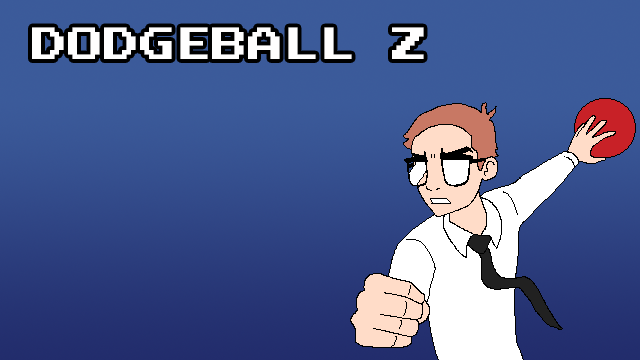
<style>
.page{position:relative;width:640px;height:360px}
.page>*{position:absolute;margin:0}
.t1{font:36px "PressStartReg";color:#fffefe}
</style>
<div class="page">
<p class="t1" style="left:32px;top:27px;width:392px;height:32px">DODGEBALL Z Z</p>
</div>
